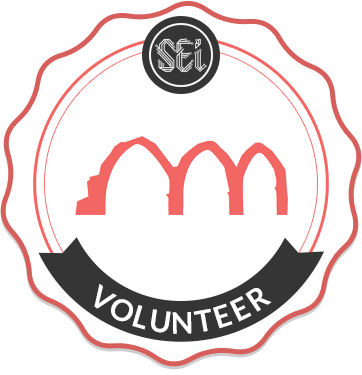
<style>
.page{position:relative;width:362px;height:375px;background:#ffffff}
.page>*{position:absolute;margin:0}
.t1{font:29.7px/66.3px "Lato-Bold";letter-spacing:0.1em;color:#ffffff}
</style>
<div class="page">
<p class="t1" style="left:94px;top:283px;width:178px;height:51px;text-align:center">VOLUNTEER</p>
</div>
